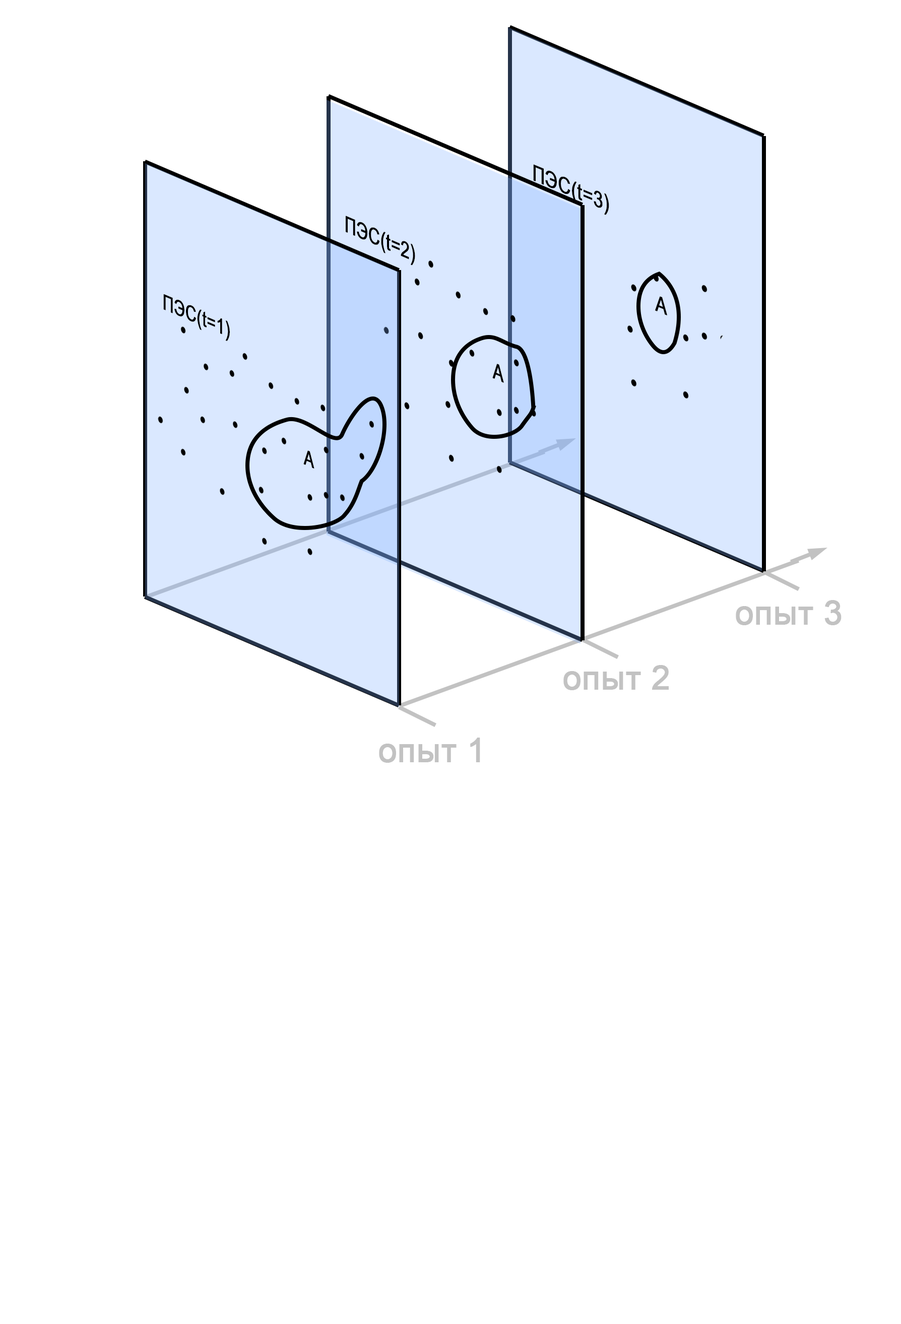
<style>
.page{position:relative;width:901px;height:1324px;background:#ffffff}
.page>*{position:absolute;margin:0}
.t1{font:22.2px "ArialMT";color:#000000;font-weight:bold;scale:0.85 1}
.t2{font:22.2px "ArialMT";color:#000000;font-weight:bold;scale:0.78 1}
.t3{font:21.1px "ArialMT";color:#000000;font-weight:bold;scale:0.78 1}
.t4{font:33.1px "ArialMT";color:#c2c2c2;font-weight:bold}
</style>
<div class="page">
<p class="t1" style="left:533px;top:164px;width:76px;height:51px;rotate:22deg">ПЭС(t=3)</p>
<p class="t2" style="left:346px;top:216px;width:69px;height:49px;rotate:23deg">ПЭС(t=2)</p>
<p class="t3" style="left:163px;top:294px;width:67px;height:47px;rotate:23deg">ПЭС(t=1)</p>
<p class="t1" style="left:655px;top:296px;width:12px;height:19px;rotate:22deg">А</p>
<p class="t2" style="left:492px;top:364px;width:12px;height:19px;rotate:23deg">А</p>
<p class="t3" style="left:303px;top:450px;width:11px;height:18px;rotate:23deg">А</p>
<p class="t4" style="left:735px;top:600px;width:106px;height:25px">опыт 3</p>
<p class="t4" style="left:563px;top:665px;width:105px;height:25px">опыт 2</p>
<p class="t4" style="left:379px;top:737px;width:101px;height:26px">опыт 1</p>
</div>
